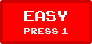
<style>
.page{position:relative;width:92px;height:44px;background:#ff0000}
.page>*{position:absolute;margin:0}
.t1{font:20px "ArcadeClassic";color:#ffffff}
.t2{font:12.4px "ArcadeClassic";color:#e6e6e6;scale:0.97 1}
</style>
<div class="page">
<p class="t1" style="left:24px;top:11px;width:43px;height:10px">EASY</p>
<p class="t2" style="left:24px;top:28px;width:44px;height:6px">press 1</p>
</div>
